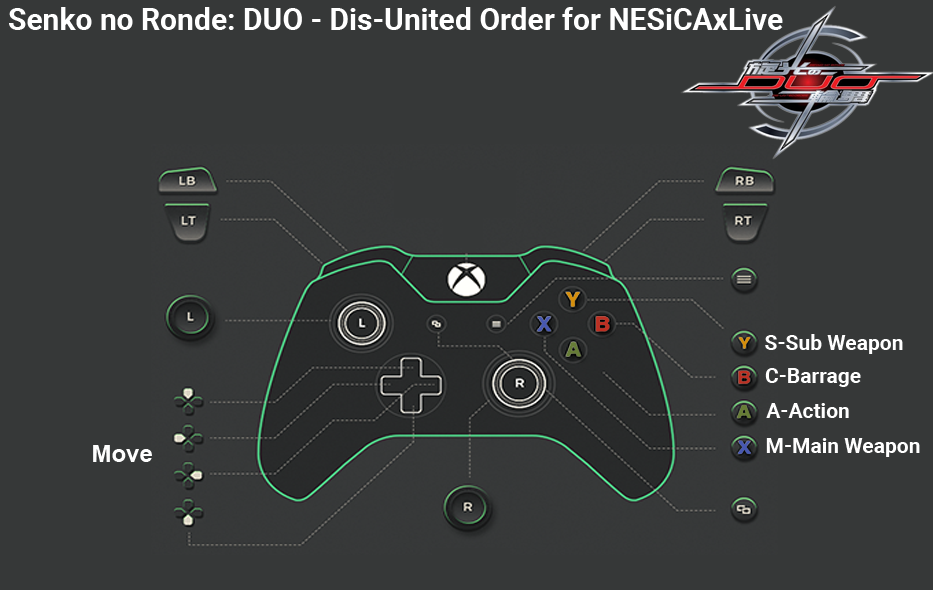
<style>
.page{position:relative;width:933px;height:590px;background:#363838}
.page>*{position:absolute;margin:0}
.t1{font:30px "Roboto-Bold";color:#ffffff}
.t2{font:21px "Roboto-Bold";color:#ffffff}
.t3{font:24px "Arial-BoldMT";color:#fefefe}
</style>
<div class="page">
<p class="t1" style="left:9px;top:7px;width:774px;height:23px">Senko no Ronde: DUO - Dis-United Order for NESiCAxLive</p>
<p class="t2" style="left:765px;top:334px;width:138px;height:20px">S-Sub Weapon</p>
<p class="t2" style="left:765px;top:368px;width:96px;height:19px">C-Barrage</p>
<p class="t2" style="left:766px;top:403px;width:83px;height:15px">A-Action</p>
<p class="t2" style="left:766px;top:438px;width:154px;height:19px">M-Main Weapon</p>
<p class="t3" style="left:93px;top:445px;width:59px;height:17px">Move</p>
</div>
